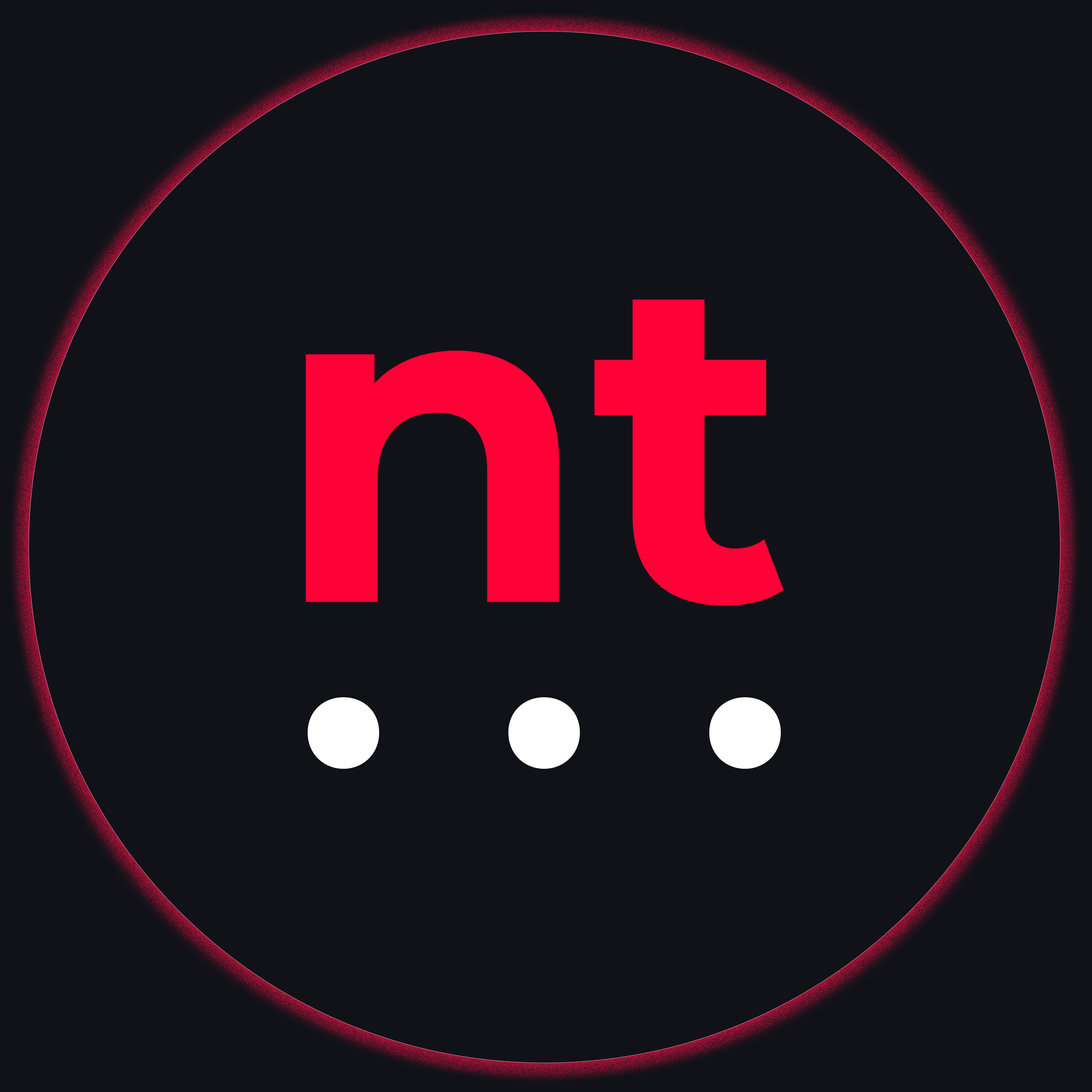
<style>
.page{position:relative;width:1092px;height:1092px;background:#111218}
.page>*{position:absolute;margin:0}
.t1{font:460.2px "Montserrat-Bold";color:#ff0037}
.t2{font:368.5px "Montserrat-Bold";color:#ffffff}
</style>
<div class="page">
<p class="t1" style="left:306px;top:299px;width:478px;height:307px">nt</p>
<p class="t2" style="left:308px;top:697px;width:473px;height:72px">. . .</p>
</div>
